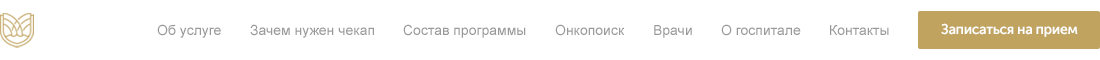
<style>
.page{position:relative;width:1100px;height:60px;background:#ffffff}
.page>*{position:absolute;margin:0}
.t1{font:14px "ArialMT";color:#999999}
.t2{font:14px "MuseoSansCyrl-700";letter-spacing:-0.025em;color:#ffffff}
</style>
<div class="page">
<p class="t1" style="left:157px;top:24px;width:64px;height:14px">Об услуге</p>
<p class="t1" style="left:250px;top:24px;width:124px;height:14px">Зачем нужен чекап</p>
<p class="t1" style="left:403px;top:24px;width:123px;height:14px">Состав программы</p>
<p class="t1" style="left:555px;top:24px;width:70px;height:12px">Онкопоиск</p>
<p class="t1" style="left:654px;top:25px;width:38px;height:13px">Врачи</p>
<p class="t1" style="left:721px;top:24px;width:80px;height:12px">О госпитале</p>
<p class="t1" style="left:830px;top:25px;width:59px;height:10px">Контакты</p>
<p class="t2" style="left:941px;top:23px;width:137px;height:14px">Записаться на прием</p>
</div>
